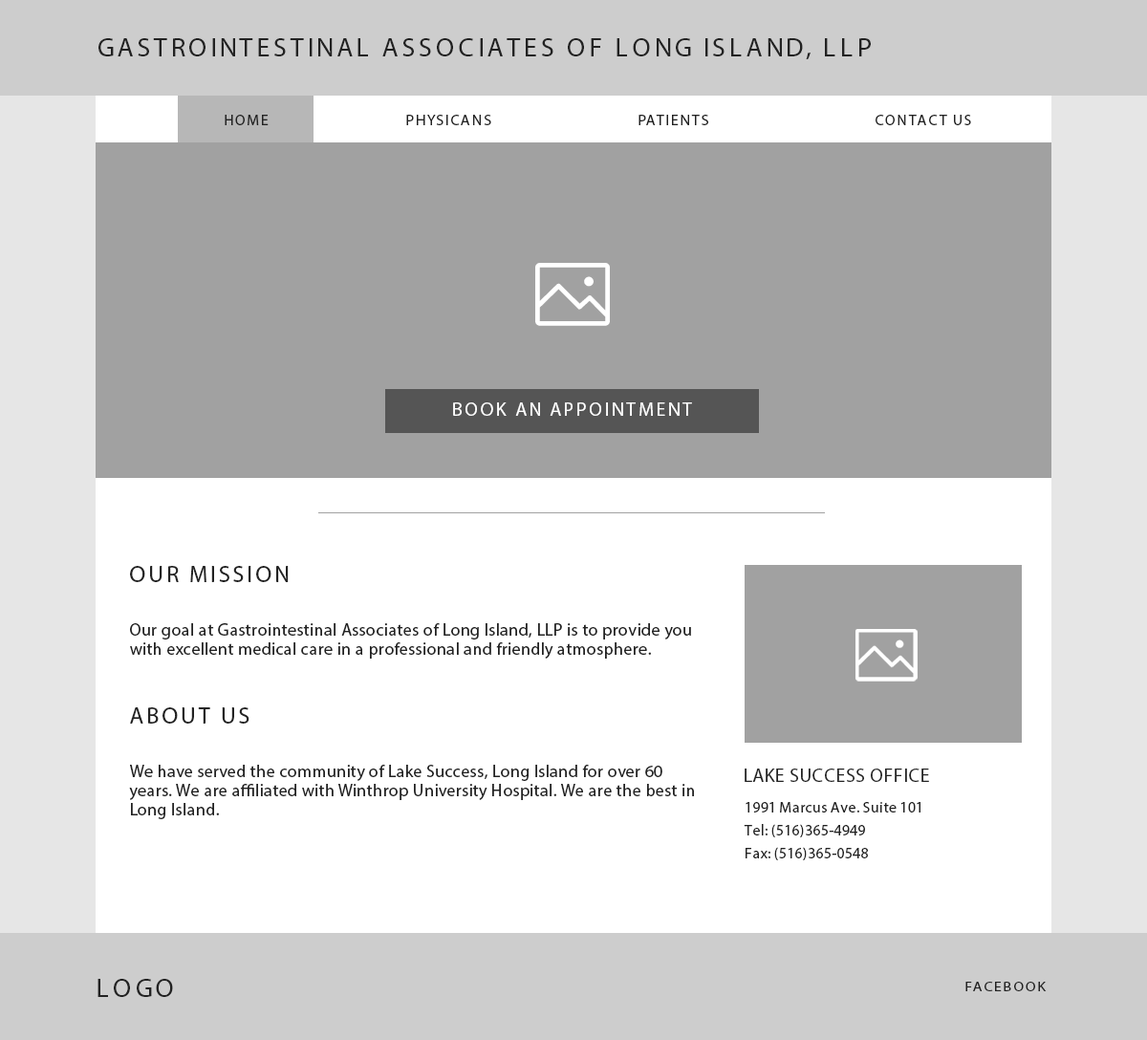
<style>
.page{position:relative;width:1147px;height:1040px;background:#ffffff}
.page>*{position:absolute;margin:0}
.t1{font:26.8px "MyriadPro-Regular";letter-spacing:0.12em;color:#222222;text-transform:uppercase}
.t2{font:15.3px "MyriadPro-Regular";letter-spacing:0.1em;color:#222222;text-transform:uppercase}
.t3{font:19.1px "MyriadPro-Regular";letter-spacing:0.12em;color:#ffffff}
.t4{font:17.2px/19.1px "MyriadPro-Regular";letter-spacing:0.02em;color:#222222}
.t5{font:26.8px/17.2px "MyriadPro-Regular";letter-spacing:0.12em;color:#222222;text-transform:uppercase}
.t6{font:22.9px/17.2px "MyriadPro-Regular";letter-spacing:0.12em;color:#222222;text-transform:uppercase}
.t7{font:22.9px/17.2px "MyriadPro-Regular";letter-spacing:0.12em;color:#222222}
.t8{font:19.1px "MyriadPro-Regular";letter-spacing:0.02em;color:#222222;text-transform:uppercase}
.t9{font:15.3px/22.9px "MyriadPro-Regular";letter-spacing:0.02em;color:#222222}
.t10{font:12.9px "MyriadPro-Regular";letter-spacing:0.1em;color:#222222;text-transform:uppercase;scale:1.18 1}
</style>
<div class="page">
<p class="t1" style="left:98px;top:38px;width:773px;height:21px">Gastrointestinal Associates of Long Island, LLP</p>
<p class="t2" style="left:225px;top:115px;width:746px;height:10px">Home             Physicans   Patients   cONTACT uS</p>
<p class="t3" style="left:453px;top:402px;width:239px;height:14px">BOOK AN APPOINTMENT</p>
<p class="t4" style="left:129px;top:566px;width:565px;height:253px"><span class="t5"><br></span><span class="t6">oUR mISSION<br><br><br></span>Our goal at Gastrointestinal Associates of Long Island, LLP is to provide you with excellent medical care in a professional and friendly atmosphere.<br><br><br><br><span class="t7">ABOUT US<br><br><br></span>We have served the community of Lake Success, Long Island for over 60 years. We are affiliated with Winthrop University Hospital. We are the best in Long Island.</p>
<p class="t8" style="left:744px;top:768px;width:185px;height:14px">lAKE sUCCESS oFFICE</p>
<p class="t9" style="left:744px;top:802px;width:176px;height:58px">1991 Marcus Ave. Suite 101<br>Tel: (516)365-4949<br>Fax: (516)365-0548</p>
<p class="t1" style="left:97px;top:979px;width:76px;height:18px">LOGO</p>
<p class="t10" style="left:965px;top:981px;width:81px;height:10px">Facebook</p>
</div>
